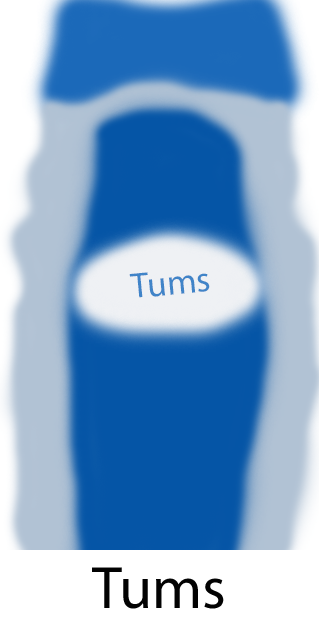
<style>
.page{position:relative;width:319px;height:622px}
.page>*{position:absolute;margin:0}
.t1{font:35.7px "MyriadPro-Regular";color:#4084c8}
.t2{font:60px "MyriadPro-Regular";color:#020202}
</style>
<div class="page">
<p class="t1" style="left:129px;top:272px;width:81px;height:26px;rotate:-5deg">Tums</p>
<p class="t2" style="left:92px;top:567px;width:132px;height:42px">Tums</p>
</div>
